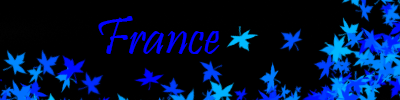
<style>
.page{position:relative;width:400px;height:100px;background:#000000}
.page>*{position:absolute;margin:0}
.t1{font:54px "Pristina-Regular";color:#0000ff}
</style>
<div class="page">
<p class="t1" style="left:98px;top:16px;width:122px;height:38px">France</p>
</div>
